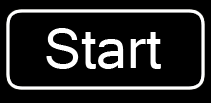
<style>
.page{position:relative;width:211px;height:103px;background:#000000}
.page>*{position:absolute;margin:0}
.t1{font:60px "Shruti";color:#ffffff}
</style>
<div class="page">
<p class="t1" style="left:46px;top:28px;width:115px;height:41px">Start</p>
</div>
